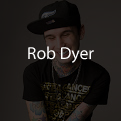
<style>
.page{position:relative;width:121px;height:121px}
.page>*{position:absolute;margin:0}
.t1{font:17.5px "MyriadPro-Regular";color:#ffffff}
</style>
<div class="page">
<p class="t1" style="left:28px;top:46px;width:66px;height:17px">Rob Dyer</p>
</div>
